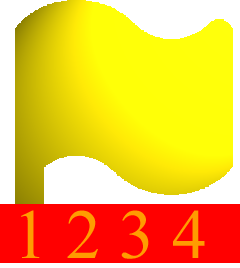
<style>
.page{position:relative;width:240px;height:268px;background:#ffffff}
.page>*{position:absolute;margin:0}
.t1{font:70px "TimesNewRomanPSMT";color:#ff9c00}
</style>
<div class="page">
<p class="t1" style="left:21px;top:210px;width:184px;height:49px">1 2 3 4</p>
</div>
